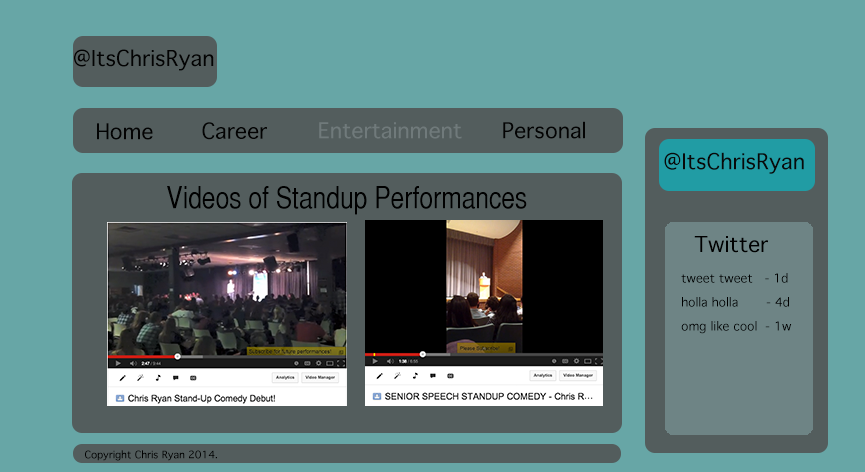
<style>
.page{position:relative;width:865px;height:472px;background:#67a6a6}
.page>*{position:absolute;margin:0}
.t1{font:21px "Thonburi";color:#030303}
.t2{font:21px "Thonburi";color:#707a7b}
.t3{font:21px "Thonburi";color:#090909}
.t4{font:30px "HelveticaCYPlain";color:#000000}
.t5{font:21px "Thonburi";color:#000000}
.t6{font:12px/24px "Thonburi";color:#000000}
.t7{font:10px "Thonburi";color:#000000}
</style>
<div class="page">
<p class="t1" style="left:74px;top:49px;width:140px;height:22px">@ItsChrisRyan</p>
<p class="t1" style="left:97px;top:123px;width:56px;height:17px">Home</p>
<p class="t1" style="left:202px;top:122px;width:65px;height:18px">Career</p>
<p class="t2" style="left:319px;top:122px;width:143px;height:17px">Entertainment</p>
<p class="t1" style="left:503px;top:121px;width:82px;height:18px">Personal</p>
<p class="t3" style="left:664px;top:152px;width:140px;height:22px">@ItsChrisRyan</p>
<p class="t4" style="left:167px;top:186px;width:360px;height:29px">Videos of Standup Performances</p>
<p class="t5" style="left:694px;top:236px;width:74px;height:17px">Twitter</p>
<p class="t6" style="left:681px;top:273px;width:111px;height:61px">tweet tweet   - 1d<br>holla holla       - 4d<br>omg like cool  - 1w</p>
<p class="t7" style="left:85px;top:450px;width:132px;height:11px">Copyright Chris Ryan 2014.</p>
</div>
